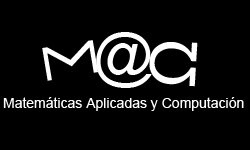
<style>
.page{position:relative;width:250px;height:150px;background:#000000}
.page>*{position:absolute;margin:0}
.t1{font:54.6px "ArialMT";color:#ffffff}
.t2{font:60px "ArialMT";color:#ffffff}
.t3{font:64.2px "ArialMT";color:#ffffff;scale:1.03 1}
.t4{font:14px "ArialMT";color:#ffffff}
</style>
<div class="page">
<p class="t1" style="left:42px;top:40px;width:56px;height:41px;rotate:81deg">∑</p>
<p class="t2" style="left:96px;top:32px;width:56px;height:56px">@</p>
<p class="t3" style="left:149px;top:42px;width:49px;height:45px;rotate:93deg">Ʊ</p>
<p class="t4" style="left:3px;top:97px;width:241px;height:14px">Matemáticas Aplicadas y Computación</p>
</div>
